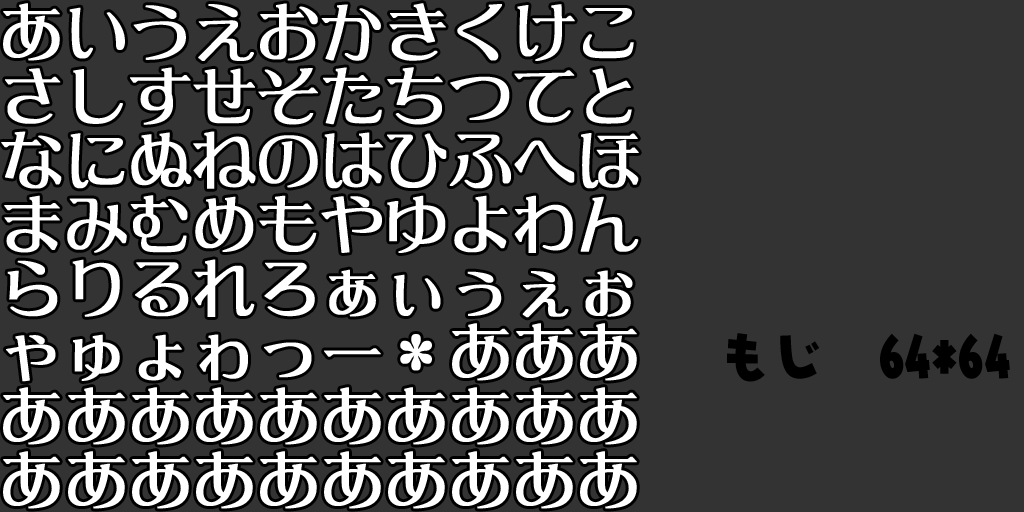
<style>
.page{position:relative;width:1024px;height:512px;background:#333333}
.page>*{position:absolute;margin:0}
.t1{font:61px "DFLeiGaSo-W5-WIN-RKSJ-H";color:#ffffff;font-weight:bold}
.t2{font:52.9px "NIS-JYA-U-83pv-RKSJ-H";color:#000000}
</style>
<div class="page">
<p class="t1" style="left:3px;top:3px;width:57px;height:58px">あ</p>
<p class="t1" style="left:133px;top:5px;width:53px;height:55px">う</p>
<p class="t1" style="left:198px;top:4px;width:56px;height:57px">え</p>
<p class="t1" style="left:260px;top:3px;width:58px;height:58px">お</p>
<p class="t1" style="left:321px;top:4px;width:60px;height:57px">か</p>
<p class="t1" style="left:389px;top:3px;width:57px;height:58px">き</p>
<p class="t1" style="left:457px;top:4px;width:45px;height:57px">く</p>
<p class="t1" style="left:517px;top:4px;width:58px;height:57px">け</p>
<p class="t1" style="left:69px;top:7px;width:56px;height:52px">い</p>
<p class="t1" style="left:583px;top:8px;width:51px;height:51px">こ</p>
<p class="t1" style="left:5px;top:68px;width:56px;height:56px">さ</p>
<p class="t1" style="left:73px;top:69px;width:50px;height:55px">し</p>
<p class="t1" style="left:130px;top:67px;width:61px;height:58px">す</p>
<p class="t1" style="left:193px;top:68px;width:62px;height:56px">せ</p>
<p class="t1" style="left:258px;top:68px;width:60px;height:57px">そ</p>
<p class="t1" style="left:323px;top:67px;width:59px;height:58px">た</p>
<p class="t1" style="left:387px;top:67px;width:56px;height:58px">ち</p>
<p class="t1" style="left:450px;top:76px;width:60px;height:44px">つ</p>
<p class="t1" style="left:514px;top:70px;width:61px;height:53px">て</p>
<p class="t1" style="left:586px;top:68px;width:46px;height:56px">と</p>
<p class="t1" style="left:1px;top:131px;width:61px;height:58px">な</p>
<p class="t1" style="left:70px;top:133px;width:55px;height:56px">に</p>
<p class="t1" style="left:131px;top:132px;width:61px;height:55px">ぬ</p>
<p class="t1" style="left:193px;top:131px;width:63px;height:58px">ね</p>
<p class="t1" style="left:259px;top:135px;width:59px;height:53px">の</p>
<p class="t1" style="left:324px;top:132px;width:59px;height:57px">は</p>
<p class="t1" style="left:387px;top:133px;width:60px;height:55px">ひ</p>
<p class="t1" style="left:449px;top:134px;width:62px;height:55px">ふ</p>
<p class="t1" style="left:581px;top:133px;width:58px;height:56px">ほ</p>
<p class="t1" style="left:514px;top:140px;width:61px;height:43px">へ</p>
<p class="t1" style="left:4px;top:195px;width:56px;height:58px">ま</p>
<p class="t1" style="left:67px;top:198px;width:60px;height:55px">み</p>
<p class="t1" style="left:130px;top:195px;width:58px;height:58px">む</p>
<p class="t1" style="left:195px;top:196px;width:59px;height:56px">め</p>
<p class="t1" style="left:259px;top:195px;width:58px;height:57px">も</p>
<p class="t1" style="left:321px;top:196px;width:61px;height:57px">や</p>
<p class="t1" style="left:387px;top:195px;width:59px;height:58px">ゆ</p>
<p class="t1" style="left:454px;top:195px;width:54px;height:58px">よ</p>
<p class="t1" style="left:514px;top:195px;width:59px;height:58px">わ</p>
<p class="t1" style="left:580px;top:196px;width:59px;height:56px">ん</p>
<p class="t1" style="left:7px;top:260px;width:51px;height:57px">ら</p>
<p class="t1" style="left:72px;top:259px;width:48px;height:58px">り</p>
<p class="t1" style="left:135px;top:262px;width:54px;height:55px">る</p>
<p class="t1" style="left:194px;top:259px;width:61px;height:58px">れ</p>
<p class="t1" style="left:264px;top:262px;width:51px;height:55px">ろ</p>
<p class="t1" style="left:329px;top:269px;width:47px;height:48px">ぁ</p>
<p class="t1" style="left:585px;top:270px;width:48px;height:47px">ぉ</p>
<p class="t1" style="left:394px;top:274px;width:47px;height:42px">ぃ</p>
<p class="t1" style="left:458px;top:271px;width:44px;height:45px">ぅ</p>
<p class="t1" style="left:522px;top:271px;width:47px;height:47px">ぇ</p>
<p class="t1" style="left:452px;top:323px;width:57px;height:58px">あ</p>
<p class="t1" style="left:516px;top:323px;width:57px;height:58px">あ</p>
<p class="t1" style="left:580px;top:323px;width:57px;height:58px">あ</p>
<p class="t1" style="left:6px;top:335px;width:50px;height:47px">ゃ</p>
<p class="t1" style="left:73px;top:334px;width:47px;height:47px">ゅ</p>
<p class="t1" style="left:138px;top:334px;width:44px;height:47px">ょ</p>
<p class="t1" style="left:199px;top:334px;width:49px;height:47px">ゎ</p>
<p class="t1" style="left:264px;top:342px;width:48px;height:36px">っ</p>
<p class="t1" style="left:400px;top:334px;width:32px;height:37px">*</p>
<p class="t2" style="left:727px;top:333px;width:283px;height:49px">もじ　64*64</p>
<p class="t1" style="left:324px;top:348px;width:57px;height:9px">ー</p>
<p class="t1" style="left:3px;top:387px;width:57px;height:58px">あ</p>
<p class="t1" style="left:68px;top:387px;width:57px;height:58px">あ</p>
<p class="t1" style="left:132px;top:387px;width:57px;height:58px">あ</p>
<p class="t1" style="left:196px;top:387px;width:57px;height:58px">あ</p>
<p class="t1" style="left:260px;top:387px;width:57px;height:58px">あ</p>
<p class="t1" style="left:324px;top:387px;width:57px;height:58px">あ</p>
<p class="t1" style="left:388px;top:387px;width:57px;height:58px">あ</p>
<p class="t1" style="left:452px;top:387px;width:57px;height:58px">あ</p>
<p class="t1" style="left:516px;top:387px;width:57px;height:58px">あ</p>
<p class="t1" style="left:580px;top:387px;width:57px;height:58px">あ</p>
<p class="t1" style="left:3px;top:451px;width:57px;height:58px">あ</p>
<p class="t1" style="left:68px;top:451px;width:57px;height:58px">あ</p>
<p class="t1" style="left:132px;top:451px;width:57px;height:58px">あ</p>
<p class="t1" style="left:196px;top:451px;width:57px;height:58px">あ</p>
<p class="t1" style="left:260px;top:451px;width:57px;height:58px">あ</p>
<p class="t1" style="left:324px;top:451px;width:57px;height:58px">あ</p>
<p class="t1" style="left:388px;top:451px;width:57px;height:58px">あ</p>
<p class="t1" style="left:452px;top:451px;width:57px;height:58px">あ</p>
<p class="t1" style="left:516px;top:451px;width:57px;height:58px">あ</p>
<p class="t1" style="left:580px;top:451px;width:57px;height:58px">あ</p>
</div>
